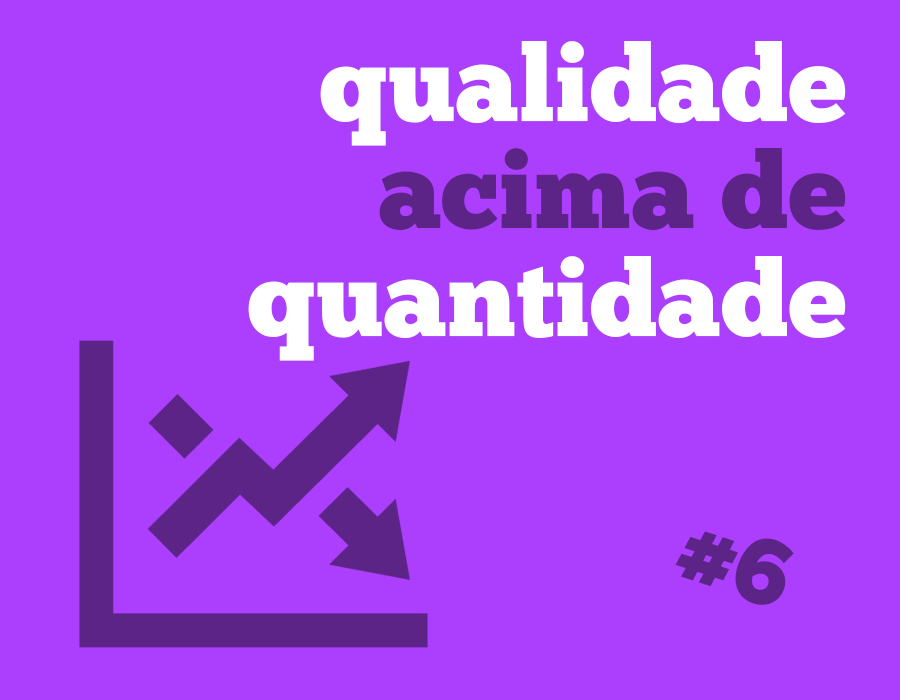
<style>
.page{position:relative;width:900px;height:700px;background:#ac3ffe}
.page>*{position:absolute;margin:0}
.t1{font:106.7px/107.8px "ChunkFive-Roman";color:#ffffff}
.t2{font:106.7px/107.8px "ChunkFive-Roman";color:#5d2488}
.t3{font:93.6px "ChunkFive-Roman";color:#5d2488}
</style>
<div class="page">
<p class="t1" style="left:248px;top:41px;width:598px;height:320px;text-align:right">qualidade<br><span class="t2">acima de<br></span>quantidade</p>
<p class="t3" style="left:675px;top:531px;width:119px;height:74px;rotate:18deg">#6</p>
</div>
